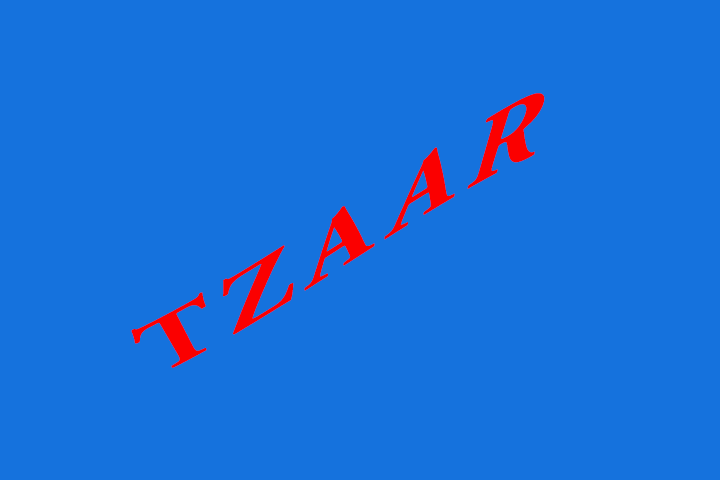
<style>
.page{position:relative;width:720px;height:480px;background:#1572dd}
.page>*{position:absolute;margin:0}
.t1{font:90px "AGaramondPro-Bold";letter-spacing:0.1em;color:#fb0000;scale:0.83 1}
</style>
<div class="page">
<p class="t1" style="left:131px;top:93px;width:414px;height:275px;text-align:center">TZAAR</p>
</div>
